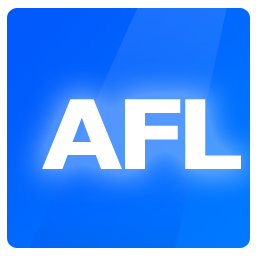
<style>
.page{position:relative;width:256px;height:256px;background:#ffffff}
.page>*{position:absolute;margin:0}
.t1{font:96px "Verdana-Bold";letter-spacing:-0.05em;color:#ffffff;scale:1.1 1}
</style>
<div class="page">
<p class="t1" style="left:42px;top:99px;width:199px;height:70px">AFL</p>
</div>
